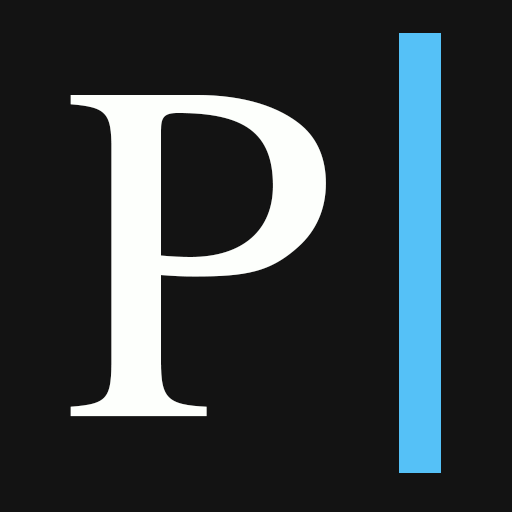
<style>
.page{position:relative;width:512px;height:512px;background:#131313}
.page>*{position:absolute;margin:0}
.t1{font:485px "STIXGeneral-Regular";color:#fdfffc}
</style>
<div class="page">
<p class="t1" style="left:70px;top:95px;width:256px;height:322px">P</p>
</div>
